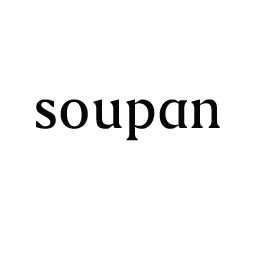
<style>
.page{position:relative;width:256px;height:256px;background:#ffffff}
.page>*{position:absolute;margin:0}
.t1{font:60px "WeibeiSC-Bold";color:#070707}
</style>
<div class="page">
<p class="t1" style="left:36px;top:99px;width:184px;height:42px">soupan</p>
</div>
